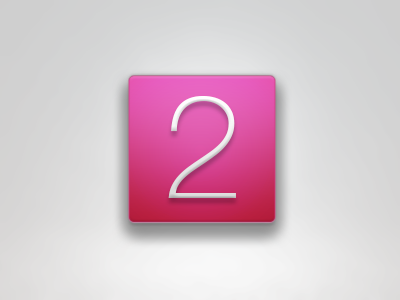
<style>
.page{position:relative;width:400px;height:300px}
.page>*{position:absolute;margin:0}
.t1{font:146.2px "HelveticaNeueLTCom-Th"}
</style>
<div class="page">
<p class="t1" style="left:168px;top:96px;width:68px;height:102px">2</p>
</div>
